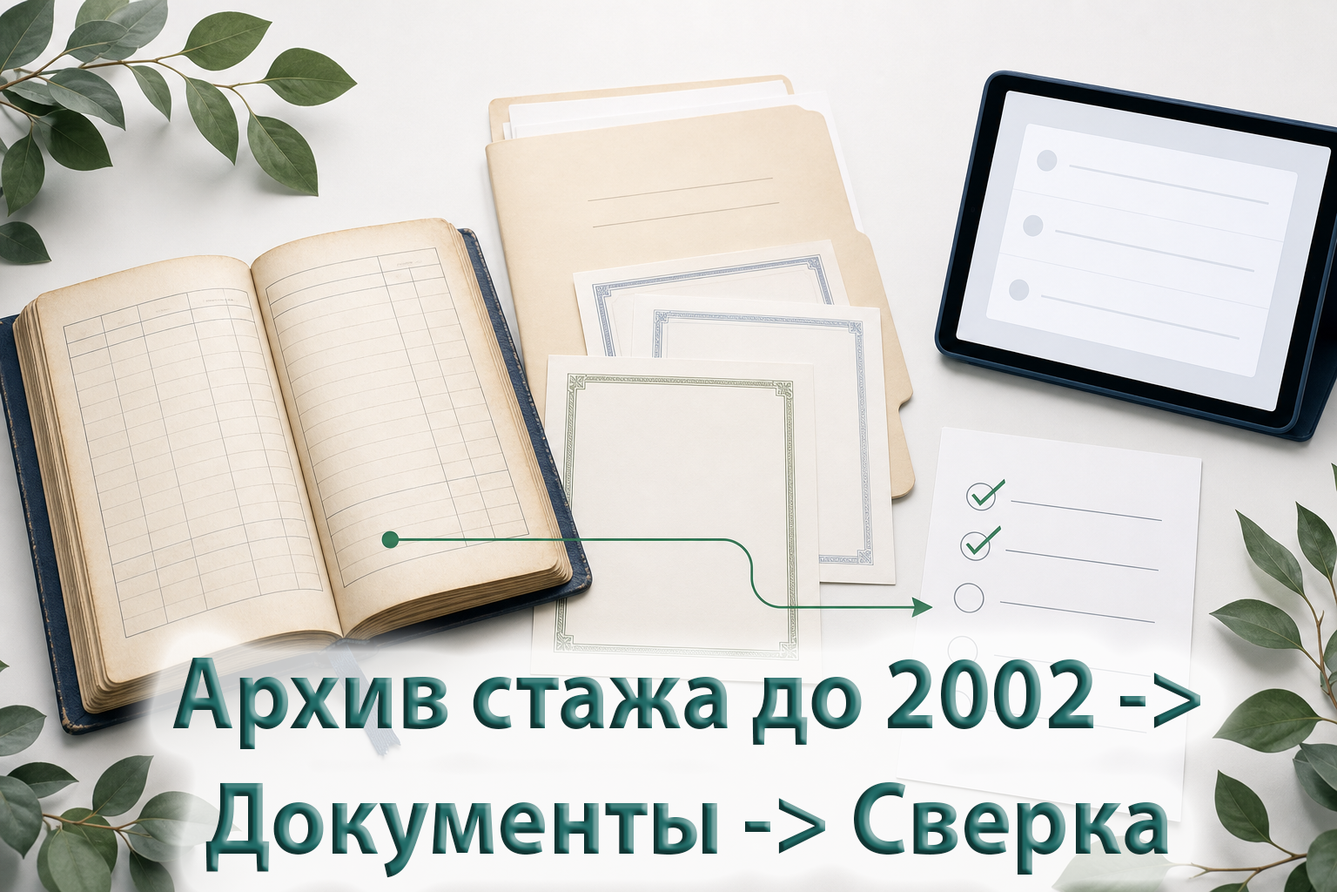
<style>
.page{position:relative;width:1337px;height:892px}
.page>*{position:absolute;margin:0}
.t1{font:104.5px "MyriadPro-Bold";scale:0.92 1}
</style>
<div class="page">
<p class="t1" style="left:172px;top:657px;width:1029px;height:221px;text-align:center">Архив стажа до 2002 -&gt; <br>Документы -&gt; Сверка</p>
</div>
